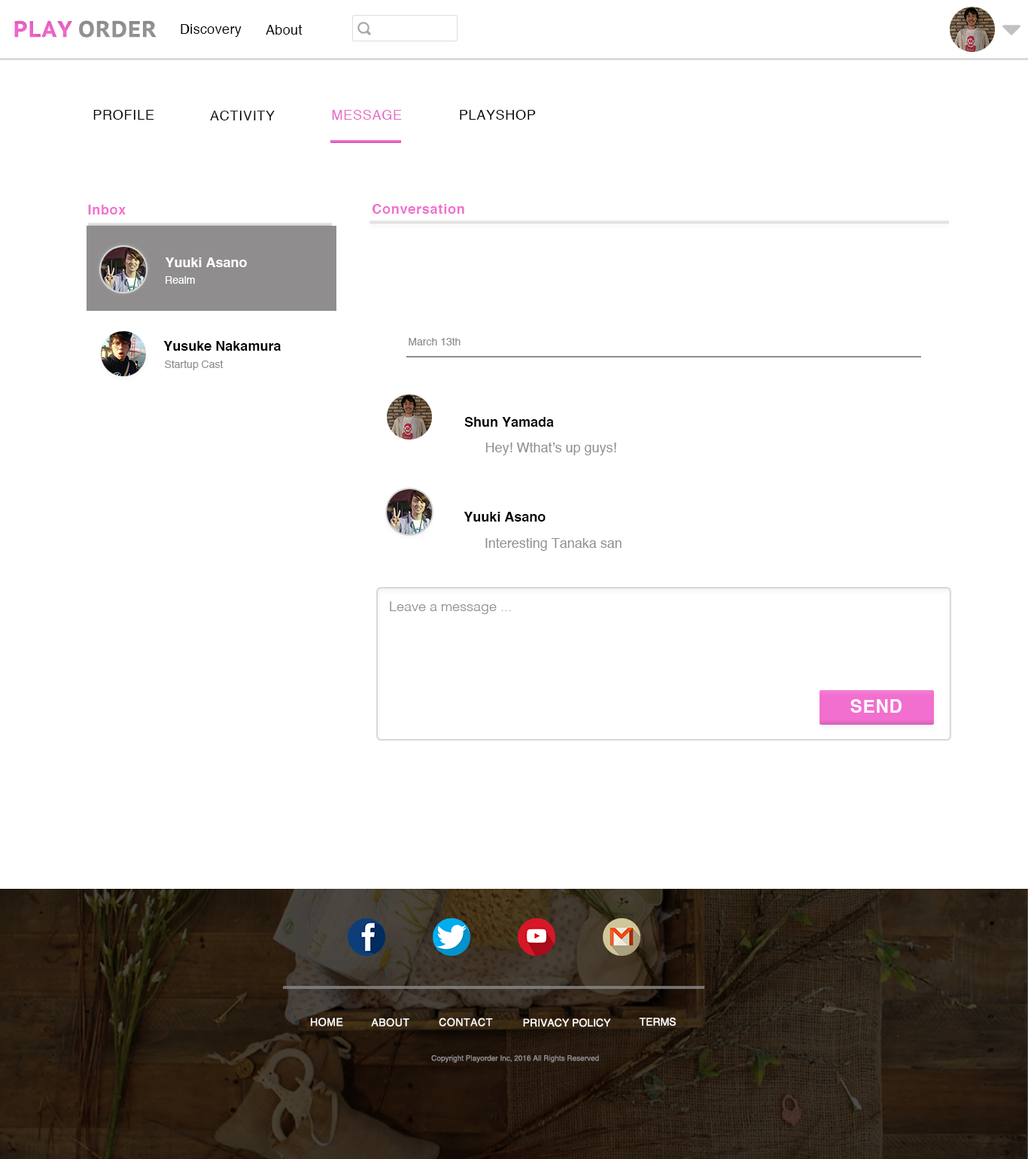
<style>
.page{position:relative;width:1028px;height:1159px;background:#ffffff}
.page>*{position:absolute;margin:0}
.t1{font:22.6px "PTSans-CaptionBold";color:#9d9a9a}
.t2{font:22.6px "PTSans-CaptionBold";color:#fc6bd5}
.t3{font:13.6px "Helvetica";color:#000000}
.t4{font:13.6px "Helvetica"}
.t5{font:13.6px "Helvetica";color:#f26ecf}
.t6{font:13.6px "Helvetica-Bold";color:#f26ecf}
.t7{font:13.6px "Helvetica-Bold";color:#ffffff}
.t8{font:10.5px "Helvetica";color:#ffffff}
.t9{font:13.6px "Helvetica-Bold";color:#000000}
.t10{font:10.5px "Helvetica";color:#8f8d8d}
.t11{font:13.6px "Helvetica";color:#8f8d8d}
.t12{font:13.6px "Helvetica-Light";color:#8f8d8d}
.t13{font:18.1px "Helvetica-Bold";color:#ffffff}
.t14{font:7.5px "Helvetica";color:#8f8d8d}
</style>
<div class="page">
<p class="t1" style="left:14px;top:20px;width:143px;height:18px"><span class="t2">PLAY </span>ORDER</p>
<p class="t3" style="left:181px;top:24px;width:61px;height:13px">Discovery</p>
<p class="t3" style="left:266px;top:25px;width:37px;height:10px">About</p>
<p class="t3" style="left:93px;top:110px;width:61px;height:10px">PROFILE</p>
<p class="t4" style="left:210px;top:111px;width:65px;height:9px">ACTIVITY</p>
<p class="t5" style="left:332px;top:110px;width:70px;height:10px">MESSAGE</p>
<p class="t3" style="left:460px;top:110px;width:76px;height:10px">PLAYSHOP</p>
<p class="t6" style="left:88px;top:205px;width:38px;height:10px">Inbox</p>
<p class="t6" style="left:373px;top:204px;width:92px;height:10px">Conversation</p>
<p class="t7" style="left:166px;top:257px;width:81px;height:10px">Yuuki Asano</p>
<p class="t8" style="left:166px;top:276px;width:29px;height:8px">Realm</p>
<p class="t9" style="left:163px;top:341px;width:118px;height:10px">Yusuke Nakamura</p>
<p class="t10" style="left:409px;top:338px;width:52px;height:8px">March 13th</p>
<p class="t10" style="left:165px;top:361px;width:59px;height:9px">Startup Cast</p>
<p class="t9" style="left:465px;top:417px;width:89px;height:10px">Shun Yamada</p>
<p class="t11" style="left:486px;top:443px;width:131px;height:12px">Hey! Wthat’s up guys!</p>
<p class="t9" style="left:464px;top:512px;width:82px;height:10px">Yuuki Asano</p>
<p class="t11" style="left:486px;top:538px;width:136px;height:13px">Interesting Tanaka san</p>
<p class="t12" style="left:390px;top:602px;width:121px;height:12px">Leave a message ...</p>
<p class="t13" style="left:851px;top:699px;width:51px;height:14px">SEND</p>
<p class="t8" style="left:311px;top:1018px;width:32px;height:9px">HOME</p>
<p class="t8" style="left:371px;top:1019px;width:39px;height:8px">ABOUT</p>
<p class="t8" style="left:439px;top:1018px;width:54px;height:9px">CONTACT</p>
<p class="t8" style="left:523px;top:1019px;width:88px;height:9px">PRIVACY POLICY</p>
<p class="t8" style="left:639px;top:1018px;width:37px;height:8px">TERMS</p>
<p class="t14" style="left:431px;top:1056px;width:168px;height:7px">Copyright Playorder Inc, 2016 All Rights Reserved</p>
</div>
